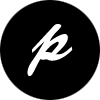
<style>
.page{position:relative;width:100px;height:100px;background:#000000}
.page>*{position:absolute;margin:0}
.t1{font:75px "BrushScriptStd";letter-spacing:-0.01em;color:#ffffff}
</style>
<div class="page">
<p class="t1" style="left:27px;top:24px;width:46px;height:53px">p</p>
</div>
